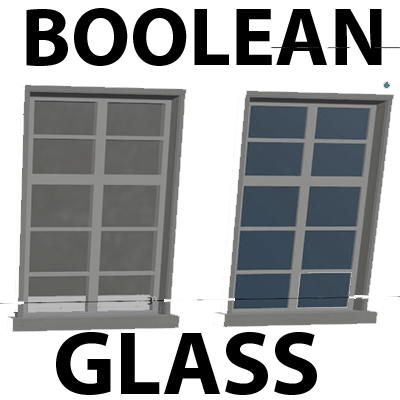
<style>
.page{position:relative;width:400px;height:400px;background:#ffffff}
.page>*{position:absolute;margin:0}
.t1{font:82.4px "MyriadPro-Bold";color:#000000}
.t2{font:91.1px "MyriadPro-Bold";color:#000000}
</style>
<div class="page">
<p class="t1" style="left:26px;top:8px;width:356px;height:58px">BOOLEAN</p>
<p class="t2" style="left:56px;top:332px;width:261px;height:63px">GLASS</p>
</div>
